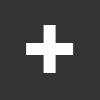
<style>
.page{position:relative;width:100px;height:100px;background:#333333}
.page>*{position:absolute;margin:0}
.t1{font:100px "Impact";color:#ffffff}
</style>
<div class="page">
<p class="t1" style="left:26px;top:25px;width:48px;height:48px">+</p>
</div>
